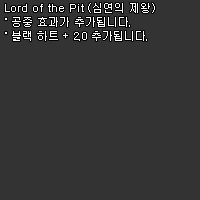
<style>
.page{position:relative;width:200px;height:200px;background:#333333}
.page>*{position:absolute;margin:0}
.t1{font:11px/14px "Dotum";color:#ffffff}
</style>
<div class="page">
<p class="t1" style="left:5px;top:3px;width:150px;height:38px">Lord of the Pit (심연의 제왕)<br>˚ 공중 효과가 추가됩니다.<br>˚ 블랙 하트 + 2.0 추가됩니다.</p>
</div>
